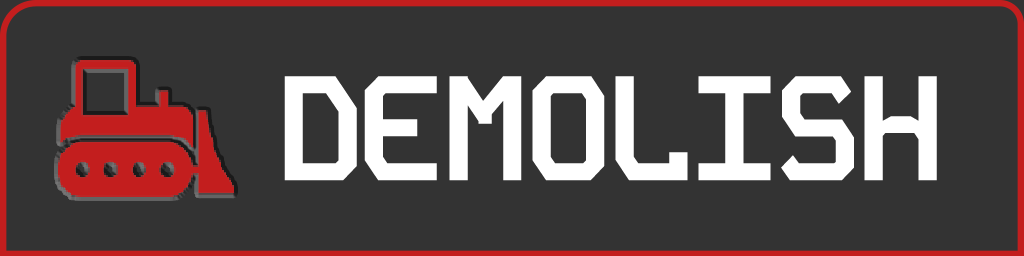
<style>
.page{position:relative;width:1024px;height:256px;background:#333333}
.page>*{position:absolute;margin:0}
.t1{font:148.3px "KodeMono-Bold";letter-spacing:-0.04em;color:#ffffff;text-transform:uppercase}
</style>
<div class="page">
<p class="t1" style="left:284px;top:76px;width:653px;height:105px">Demolish</p>
</div>
